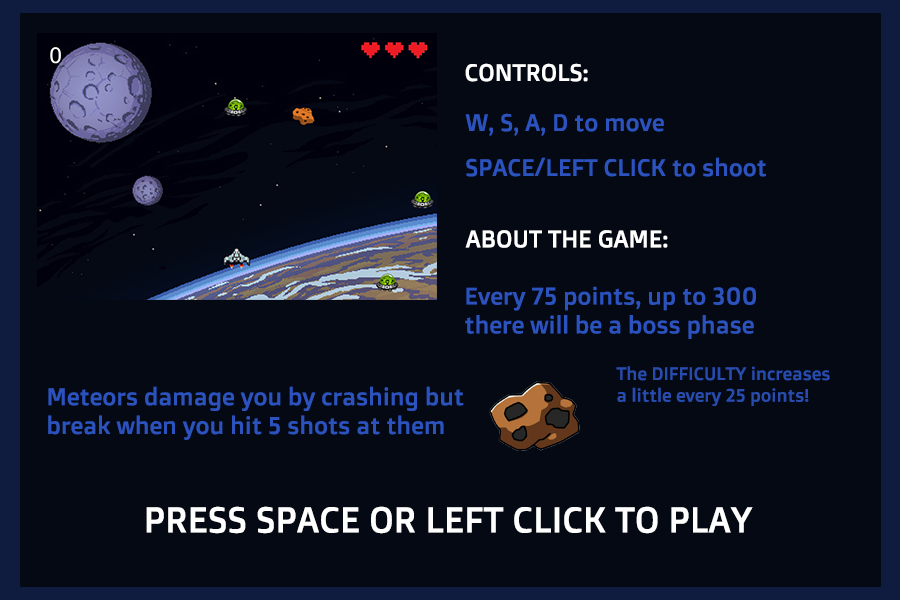
<style>
.page{position:relative;width:900px;height:600px;background:#050914}
.page>*{position:absolute;margin:0}
.t1{font:24px "DoppioOne-Regular";color:#ffffff}
.t2{font:24px "DoppioOne-Regular";color:#2c53bd}
.t3{font:18px "DoppioOne-Regular";color:#284cae}
.t4{font:36px "DoppioOne-Regular";color:#ffffff}
</style>
<div class="page">
<p class="t1" style="left:465px;top:63px;width:123px;height:19px">CONTROLS:</p>
<p class="t2" style="left:465px;top:113px;width:199px;height:23px">W, S, A, D to move</p>
<p class="t2" style="left:466px;top:157px;width:300px;height:20px">SPACE/LEFT CLICK to shoot</p>
<p class="t1" style="left:465px;top:230px;width:203px;height:18px">ABOUT THE GAME:</p>
<p class="t2" style="left:465px;top:286px;width:291px;height:53px">Every 75 points, up to 300<br>there will be a boss phase</p>
<p class="t3" style="left:616px;top:366px;width:214px;height:40px">The DIFFICULTY increases <br>a little every 25 points!</p>
<p class="t2" style="left:48px;top:386px;width:416px;height:54px">Meteors damage you by crashing but <br>break when you hit 5 shots at them</p>
<p class="t4" style="left:146px;top:506px;width:607px;height:28px">PRESS SPACE OR LEFT CLICK TO PLAY</p>
</div>
